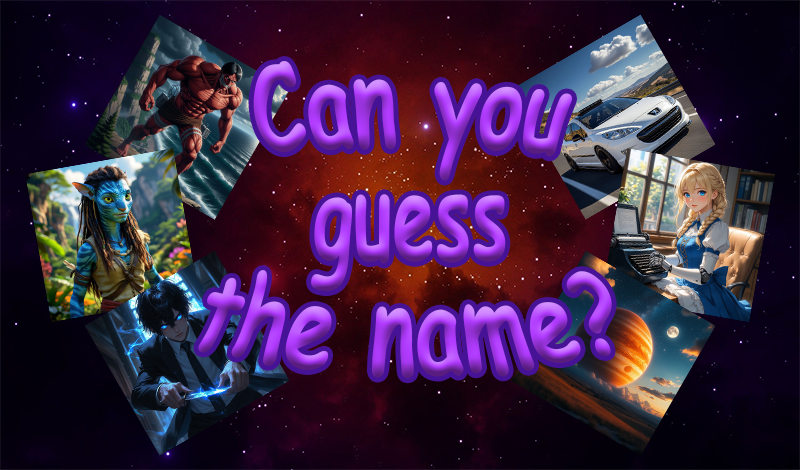
<style>
.page{position:relative;width:800px;height:470px}
.page>*{position:absolute;margin:0}
.t1{font:100px/91.7px "ComicSansMS-Bold"}
</style>
<div class="page">
<p class="t1" style="left:198px;top:61px;width:414px;height:318px;text-align:center">Can you<br>guess<br>the name?</p>
</div>
